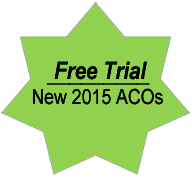
<style>
.page{position:relative;width:192px;height:178px;background:#ffffff}
.page>*{position:absolute;margin:0}
.t1{font:20.8px "ArialMT";color:#000000;scale:0.85 1}
.t2{font:24px "Arial-BoldItalicMT";color:#000000;scale:0.85 1}
.t3{font:24px "ArialMT";color:#000000;scale:0.85 1}
</style>
<div class="page">
<p class="t1" style="left:33px;top:61px;width:130px;height:44px;text-align:center"><span class="t2">Free Trial<br></span>New 2015 ACOs</p>
<p class="t1" style="left:33px;top:61px;width:130px;height:44px;text-align:center"><span class="t2">Free Trial<br></span>New 2015 ACOs</p>
<p class="t3" style="left:46px;top:83px;width:104px;height:2px">_________</p>
</div>
